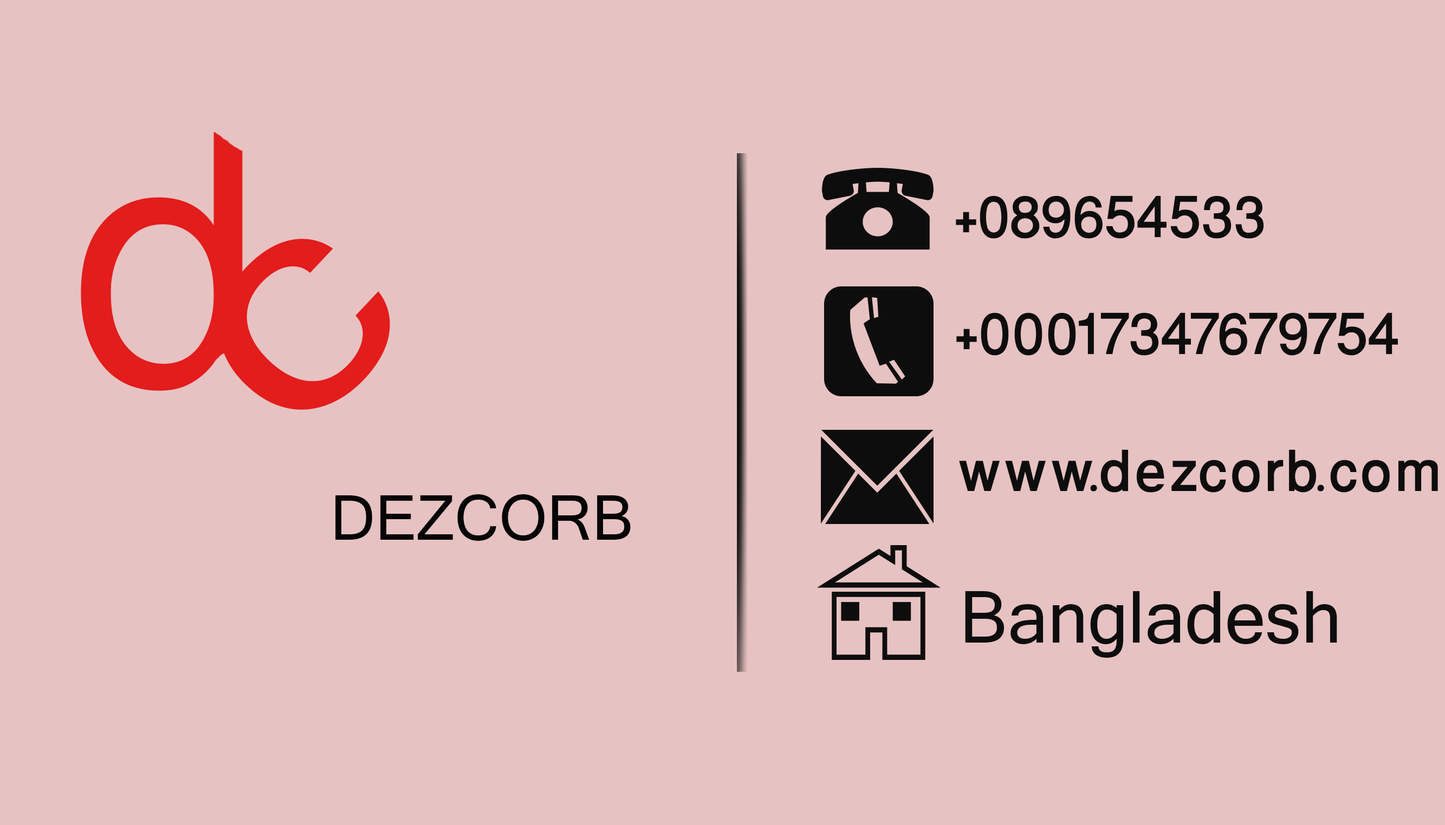
<style>
.page{position:relative;width:1445px;height:825px;background:#e7c2c2}
.page>*{position:absolute;margin:0}
.t1{font:80.3px "WinSoftPro-Medium";color:#0e0d0d}
.t2{font:332.5px "Raavi";color:#e31c1c;scale:1.17 1}
.t3{font:68.8px "Raavi";color:#050505}
.t4{font:80.3px "Raavi";color:#0e0d0d}
</style>
<div class="page">
<p class="t1" style="left:955px;top:196px;width:309px;height:43px">+089654533</p>
<p class="t2" style="left:219px;top:239px;width:171px;height:171px;rotate:-47deg">c</p>
<p class="t1" style="left:956px;top:313px;width:441px;height:43px">+00017347679754</p>
<p class="t1" style="left:959px;top:450px;width:479px;height:43px">www.dezcorb.com</p>
<p class="t3" style="left:335px;top:495px;width:295px;height:46px">DEZCORB</p>
<p class="t4" style="left:965px;top:591px;width:372px;height:67px">Bangladesh</p>
</div>
